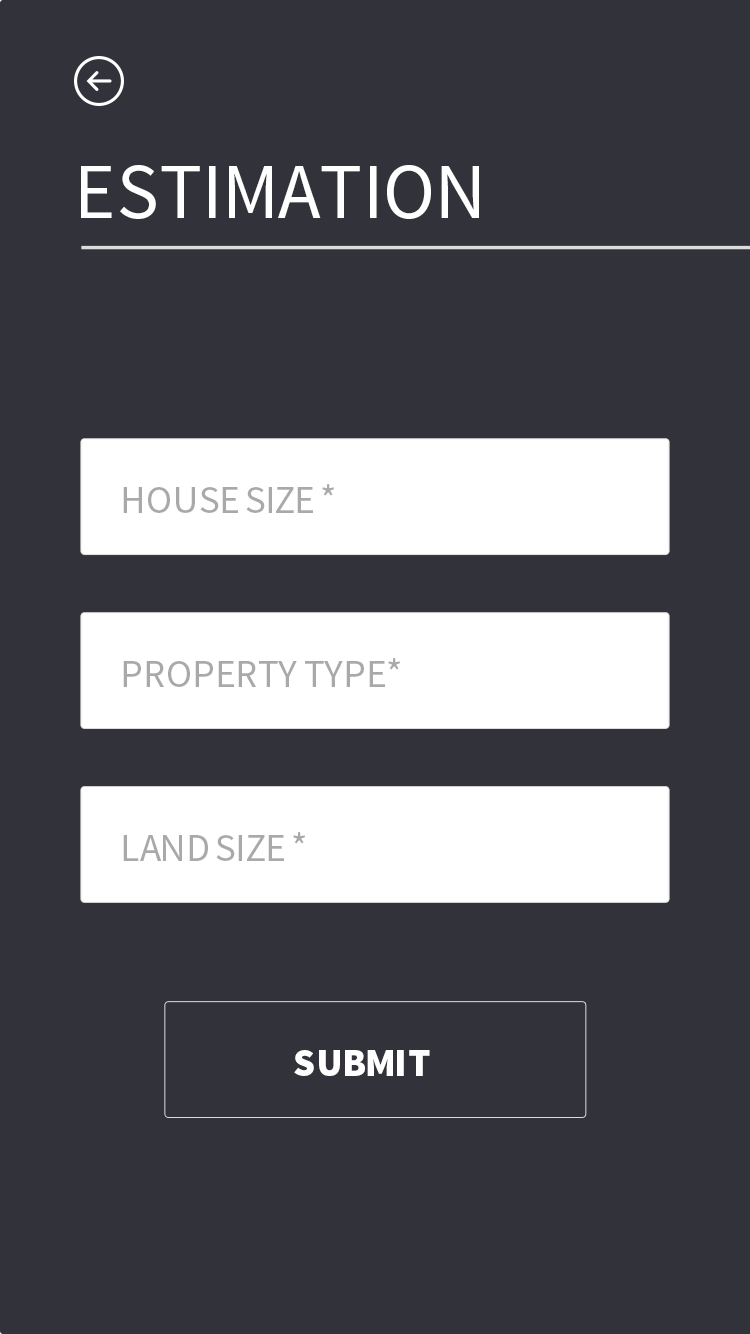
<style>
.page{position:relative;width:750px;height:1334px;background:#32323a}
.page>*{position:absolute;margin:0}
.t1{font:78.8px "SourceSansPro-Regular";color:#ffffff}
.t2{font:39.4px "SourceSansPro-Regular";color:#a9a9a9}
.t3{font:39.4px "SourceSansPro-Black";color:#ffffff}
</style>
<div class="page">
<p class="t1" style="left:81px;top:165px;width:398px;height:54px">ESTIMATION</p>
<p class="t2" style="left:123px;top:484px;width:211px;height:29px">HOUSE SIZE *</p>
<p class="t2" style="left:123px;top:658px;width:277px;height:29px">PROPERTY TYPE*</p>
<p class="t2" style="left:123px;top:832px;width:182px;height:29px">LAND SIZE *</p>
<p class="t3" style="left:294px;top:1050px;width:136px;height:26px">SUBMIT</p>
</div>
